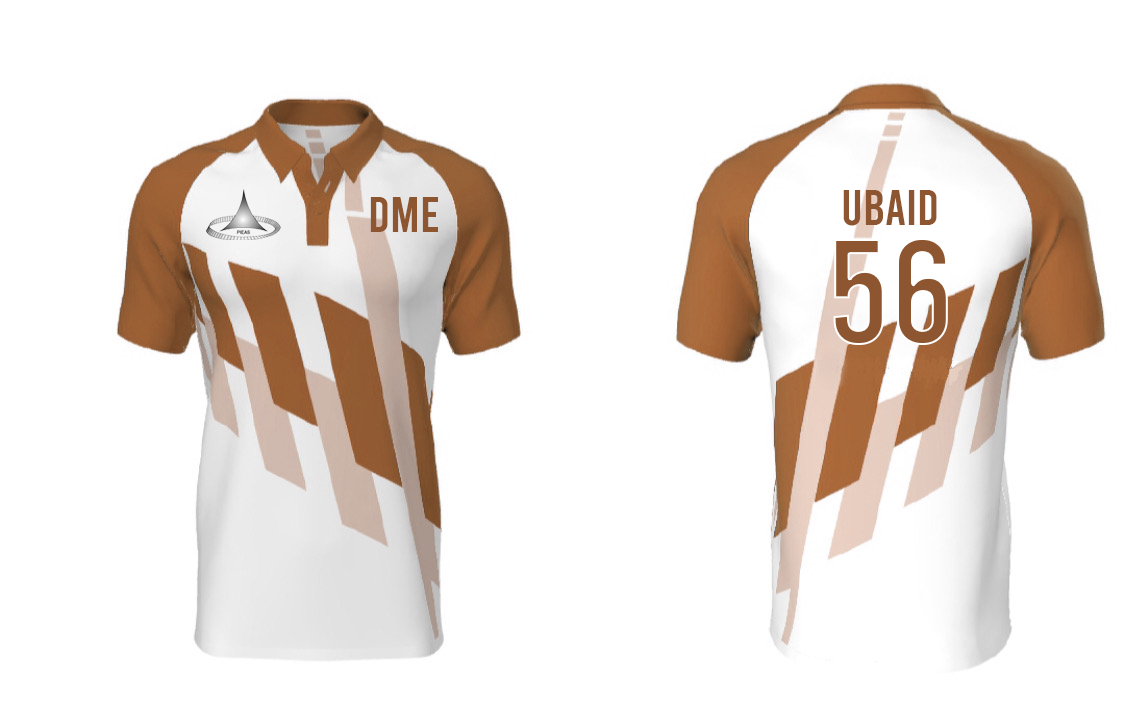
<style>
.page{position:relative;width:1125px;height:706px;background:#ffffff}
.page>*{position:absolute;margin:0}
.t1{font:50px "Bebas-Regular";color:#8d5630}
.t2{font:150px "Bebas-Regular";color:#8d5630}
</style>
<div class="page">
<p class="t1" style="left:370px;top:197px;width:68px;height:35px">DME</p>
<p class="t1" style="left:843px;top:190px;width:94px;height:36px">UBAID</p>
<p class="t2" style="left:833px;top:238px;width:115px;height:107px">56</p>
</div>
